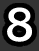
<style>
.page{position:relative;width:39px;height:51px;background:#333333}
.page>*{position:absolute;margin:0}
.t1{font:42px "RocknRollOne-Regular";color:#ffffff}
</style>
<div class="page">
<p class="t1" style="left:7px;top:7px;width:26px;height:35px">8</p>
</div>
